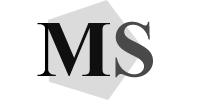
<style>
.page{position:relative;width:200px;height:100px;background:#ffffff}
.page>*{position:absolute;margin:0}
.t1{font:80px "TimesNewRomanPS-BoldMT";color:#000102}
.t2{font:80px "TimesNewRomanPS-BoldMT";color:#494949}
</style>
<div class="page">
<p class="t1" style="left:37px;top:21px;width:116px;height:57px">M<span class="t2">S</span></p>
</div>
